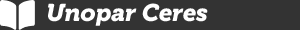
<style>
.page{position:relative;width:300px;height:30px;background:#333333}
.page>*{position:absolute;margin:0}
.t1{font:24px "MuseoW03-900Italic";color:#ffffff}
</style>
<div class="page">
<p class="t1" style="left:48px;top:3px;width:160px;height:23px">Unopar Ceres</p>
</div>
